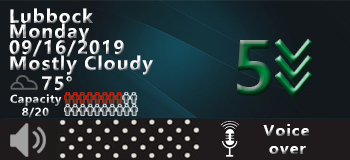
<style>
.page{position:relative;width:350px;height:160px}
.page>*{position:absolute;margin:0}
.t1{font:18px/15.7px "MicrosoftYaHei-Bold";letter-spacing:0.06em}
.t2{font:18px/20.7px "MicrosoftYaHei-Bold";letter-spacing:0.06em}
.t3{font:73px "MicrosoftYaHei-Bold";letter-spacing:0.06em}
.t4{font:15.3px/17.8px "MicrosoftYaHei-Bold";letter-spacing:0.06em}
</style>
<div class="page">
<p class="t1" style="left:9px;top:8px;width:144px;height:83px">Lubbock<br>Monday <br>09/16/2019<br><span class="t2">Mostly Cloudy<br>     75°</span></p>
<p class="t3" style="left:237px;top:40px;width:35px;height:56px">5</p>
<p class="t4" style="left:263px;top:124px;width:46px;height:30px">Voice<br> over</p>
</div>
